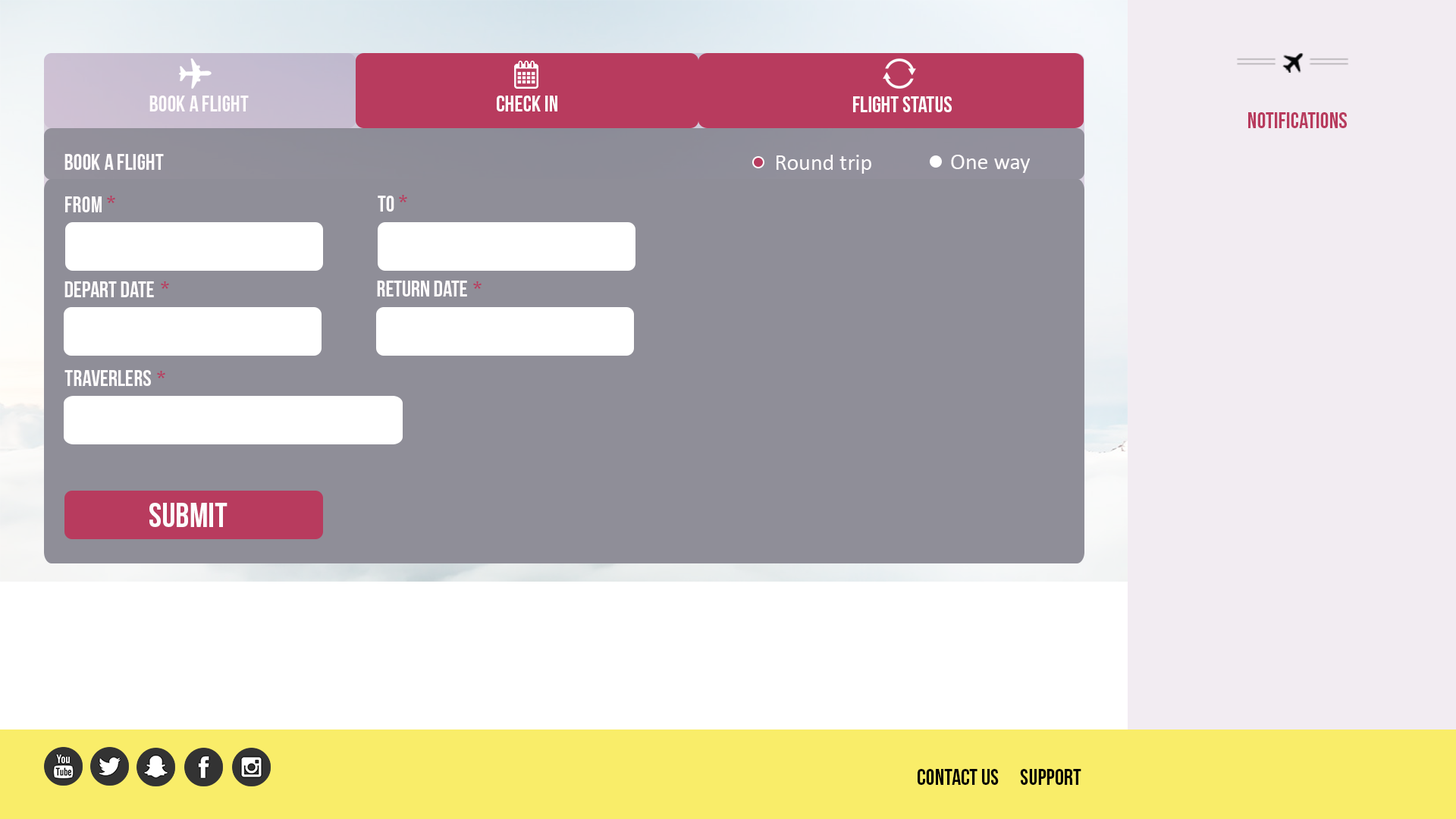
<style>
.page{position:relative;width:1456px;height:819px;background:#8f8e98}
.page>*{position:absolute;margin:0}
.t1{font:22.7px "BebasNeue";color:#fefbfc}
.t2{font:22.7px "BebasNeue";color:#fefefe}
.t3{font:22.7px "BebasNeue";color:#b83b5e}
.t4{font:22.7px "Calibri";color:#fefbfc}
.t5{font:19.9px "BebasNeue";color:#b83b5e;scale:1.06 1}
.t6{font:34.6px "BebasNeue";color:#fefbfc}
.t7{font:22.7px "BebasNeue";color:#020202}
</style>
<div class="page">
<p class="t1" style="left:149px;top:96px;width:100px;height:15px">book a flight</p>
<p class="t2" style="left:497px;top:96px;width:60px;height:15px">check in</p>
<p class="t2" style="left:853px;top:96px;width:99px;height:16px">flight status</p>
<p class="t3" style="left:1248px;top:112px;width:99px;height:16px">notifications</p>
<p class="t1" style="left:64px;top:154px;width:100px;height:16px">book a flight</p>
<p class="t4" style="left:777px;top:155px;width:94px;height:19px">Round trip</p>
<p class="t4" style="left:951px;top:155px;width:79px;height:18px">One way</p>
<p class="t1" style="left:65px;top:196px;width:37px;height:16px">from</p>
<p class="t5" style="left:107px;top:196px;width:8px;height:7px">*</p>
<p class="t1" style="left:378px;top:196px;width:16px;height:16px">to</p>
<p class="t5" style="left:399px;top:195px;width:8px;height:7px">*</p>
<p class="t1" style="left:64px;top:281px;width:90px;height:16px">depart date</p>
<p class="t5" style="left:161px;top:281px;width:8px;height:8px">*</p>
<p class="t1" style="left:377px;top:281px;width:90px;height:16px">return date</p>
<p class="t5" style="left:473px;top:281px;width:9px;height:8px">*</p>
<p class="t1" style="left:64px;top:370px;width:87px;height:16px">traverlers</p>
<p class="t5" style="left:157px;top:371px;width:8px;height:7px">*</p>
<p class="t6" style="left:149px;top:503px;width:78px;height:24px">submit</p>
<p class="t7" style="left:918px;top:769px;width:163px;height:16px">contact us      support</p>
</div>
